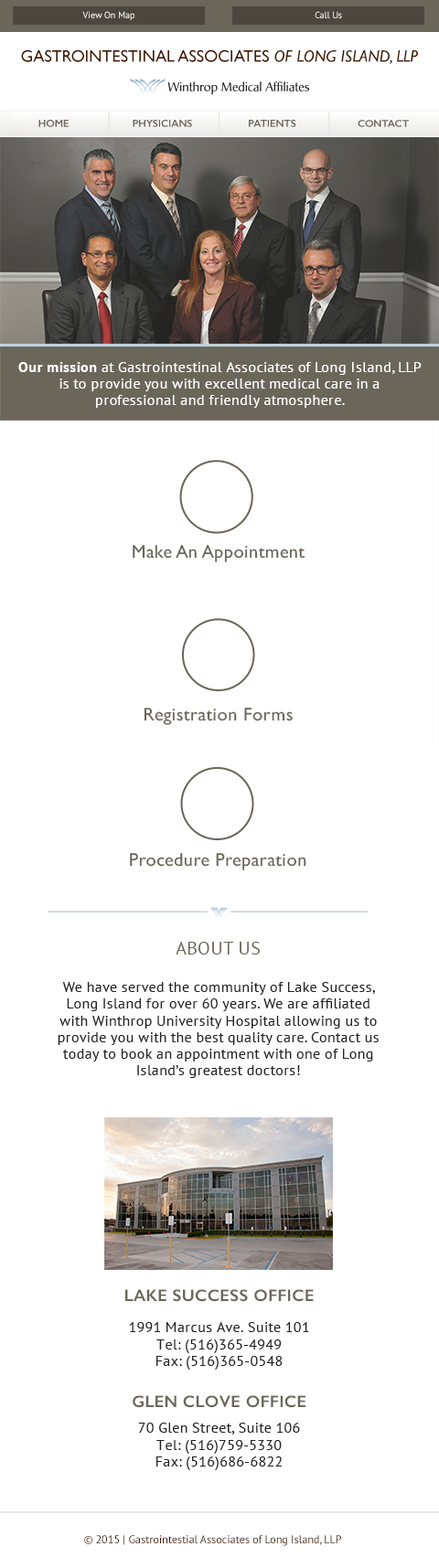
<style>
.page{position:relative;width:439px;height:1568px;background:#ffffff}
.page>*{position:absolute;margin:0}
.t1{font:9.3px "PTSans-Regular";color:#ffffff}
.t2{font:9.3px "PTSans-Regular"}
.t3{font:16.7px "GillSans";color:#401c01}
.t4{font:16.7px "GillSans-Italic";color:#401c01}
.t5{font:10.2px "GillSans-SemiBold";color:#6b665a}
.t6{font:10.1px "GillSans-SemiBold";color:#6b665a}
.t7{font:14.8px/16.7px "PTSans-Regular";letter-spacing:0.02em;color:#ffffff}
.t8{font:14.8px/16.7px "PTSans-Bold";letter-spacing:0.02em;color:#ffffff}
.t9{font:18.5px "GillSans";letter-spacing:0.02em;color:#6b665a}
.t10{font:14.8px/16.7px "PTSans-Regular";letter-spacing:0.02em;color:#222222}
.t11{font:18.5px/10.6px "PTSans-Regular";letter-spacing:0.02em;color:#6b665a;text-transform:uppercase}
.t12{font:16.7px "GillSans-SemiBold";letter-spacing:0.02em;color:#6b665a;text-transform:uppercase}
.t13{font:11.1px "PTSans-Regular";color:#401c01}
</style>
<div class="page">
<p class="t1" style="left:82px;top:11px;width:52px;height:9px">View On Map</p>
<p class="t2" style="left:315px;top:11px;width:27px;height:7px">Call Us</p>
<p class="t3" style="left:21px;top:49px;width:397px;height:15px">GASTROINTESTINAL ASSOCIATES <span class="t4">OF LONG ISLAND, LLP</span></p>
<p class="t5" style="left:38px;top:120px;width:31px;height:7px">HOME</p>
<p class="t5" style="left:133px;top:120px;width:59px;height:7px">PHYSICIANS</p>
<p class="t5" style="left:249px;top:120px;width:47px;height:7px">PATIENTS</p>
<p class="t6" style="left:357px;top:120px;width:52px;height:7px">CONTACT</p>
<p class="t7" style="left:18px;top:362px;width:403px;height:46px;text-align:center"><span class="t8">Our mission</span> at Gastrointestinal Associates of Long Island, LLP is to provide you with excellent medical care in a <br>professional and friendly atmosphere.</p>
<p class="t9" style="left:133px;top:545px;width:172px;height:17px">Make An Appointment</p>
<p class="t9" style="left:144px;top:708px;width:149px;height:17px">Registration Forms</p>
<p class="t9" style="left:130px;top:853px;width:176px;height:17px">Procedure Preparation</p>
<p class="t10" style="left:58px;top:942px;width:321px;height:136px;text-align:center"><span class="t11">About Us<br><br><br></span>We have served the community of Lake Success, Long Island for over 60 years. We are affiliated with Winthrop University Hospital allowing us to provide you with the best quality care. Contact us today to book an appointment with one of Long Island’s greatest doctors!</p>
<p class="t12" style="left:125px;top:1289px;width:189px;height:13px">lAKE sUCCESS oFFICE</p>
<p class="t10" style="left:129px;top:1322px;width:180px;height:48px;text-align:center">1991 Marcus Ave. Suite 101<br>Tel: (516)365-4949<br>Fax: (516)365-0548</p>
<p class="t12" style="left:133px;top:1395px;width:172px;height:13px">Glen Clove oFFICE</p>
<p class="t10" style="left:138px;top:1423px;width:162px;height:47px;text-align:center">70 Glen Street, Suite 106<br>Tel: (516)759-5330<br>Fax: (516)686-6822</p>
<p class="t13" style="left:84px;top:1535px;width:257px;height:11px">© 2015 | Gastrointestial Associates of Long Island, LLP</p>
</div>
